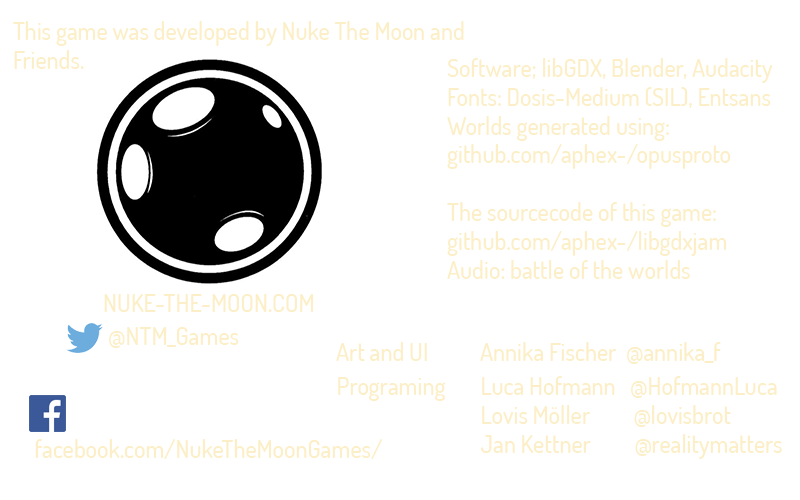
<style>
.page{position:relative;width:800px;height:500px;background:#ffffff}
.page>*{position:absolute;margin:0}
.t1{font:24px "Dosis-Medium";color:#fcefc8}
</style>
<div class="page">
<p class="t1" style="left:447px;top:58px;width:326px;height:221px">Software; libGDX, Blender, Audacity<br>Fonts: Dosis-Medium (SIL), Entsans<br>Worlds generated using:<br>github.com/aphex-/opusproto<br><br>The sourcecode of this game:<br>github.com/aphex-/libgdxjam<br>Audio: battle of the worlds</p>
<p class="t1" style="left:104px;top:294px;width:210px;height:18px">NUKE-THE-MOON.COM</p>
<p class="t1" style="left:109px;top:327px;width:130px;height:21px">@NTM_Games</p>
<p class="t1" style="left:336px;top:342px;width:385px;height:22px">Art and UI   Annika Fischer  @annika_f</p>
<p class="t1" style="left:338px;top:376px;width:444px;height:83px">Programing Luca Hofmann   @HofmannLuca<br>    Lovis Möller         @lovisbrot <br>    Jan Kettner    @realitymatters</p>
<p class="t1" style="left:35px;top:439px;width:347px;height:20px">facebook.com/NukeTheMoonGames/</p>
</div>
